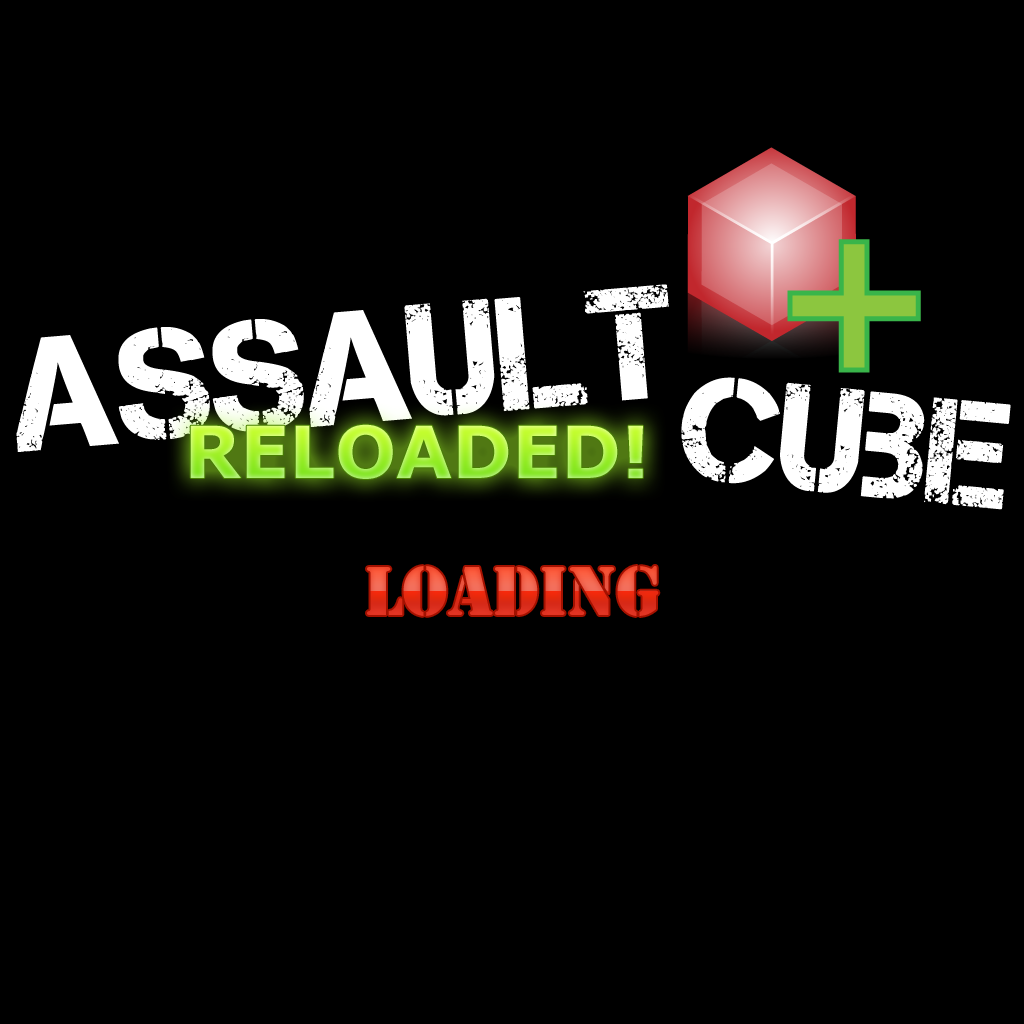
<style>
.page{position:relative;width:1024px;height:1024px;background:#000000}
.page>*{position:absolute;margin:0}
.t1{font:160px "Captureit";color:#ffffff}
.t2{font:150px "Captureit";color:#ffffff}
.t3{font:72px "Verdana-Bold"}
.t4{font:72px "Stencil"}
</style>
<div class="page">
<p class="t1" style="left:16px;top:284px;width:653px;height:168px;rotate:-5deg">Assault</p>
<p class="t2" style="left:681px;top:377px;width:330px;height:133px;rotate:5deg">Cube</p>
<p class="t3" style="left:190px;top:424px;width:453px;height:55px">RELOADED!</p>
<p class="t4" style="left:367px;top:566px;width:292px;height:50px">Loading</p>
</div>
